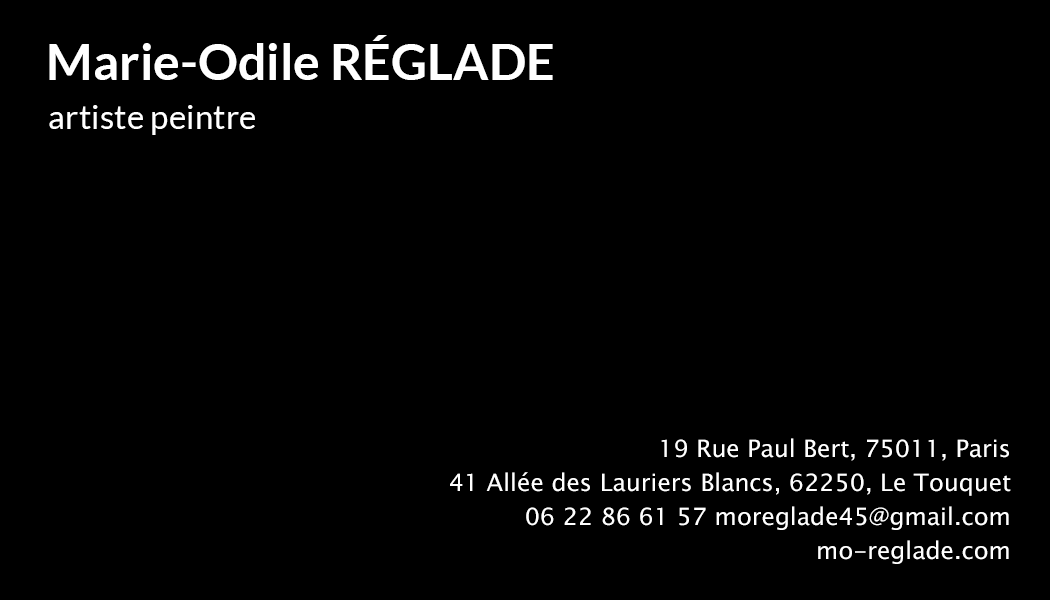
<style>
.page{position:relative;width:1050px;height:600px;background:#000000}
.page>*{position:absolute;margin:0}
.t1{font:24px/34px "LucidaSansUnicode";color:#ffffff}
</style>
<div class="page">
<p class="t1" style="left:450px;top:438px;width:561px;height:126px;text-align:right">19 Rue Paul Bert, 75011, Paris<br>41 Allée des Lauriers Blancs, 62250, Le Touquet<br>06 22 86 61 57 moreglade45@gmail.com<br>mo-reglade.com</p>
</div>
